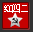
<style>
.page{position:relative;width:33px;height:32px;background:#c50000}
.page>*{position:absolute;margin:0}
.t1{font:10.4px "SimSun";letter-spacing:-0.25em;color:#ffffff}
</style>
<div class="page">
<p class="t1" style="left:4px;top:4px;width:24px;height:9px">红四二</p>
</div>
